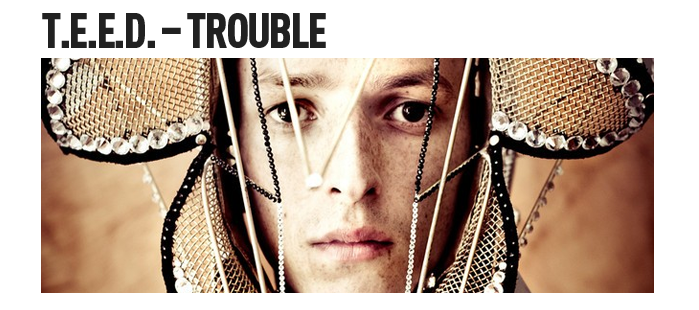
<style>
.page{position:relative;width:699px;height:310px;background:#ffffff}
.page>*{position:absolute;margin:0}
.t1{font:48px "DINOT-CondBlack";letter-spacing:-0.05em;color:#212121;text-transform:uppercase}
</style>
<div class="page">
<p class="t1" style="left:42px;top:13px;width:284px;height:35px">T.E.E.D. – Trouble</p>
</div>
